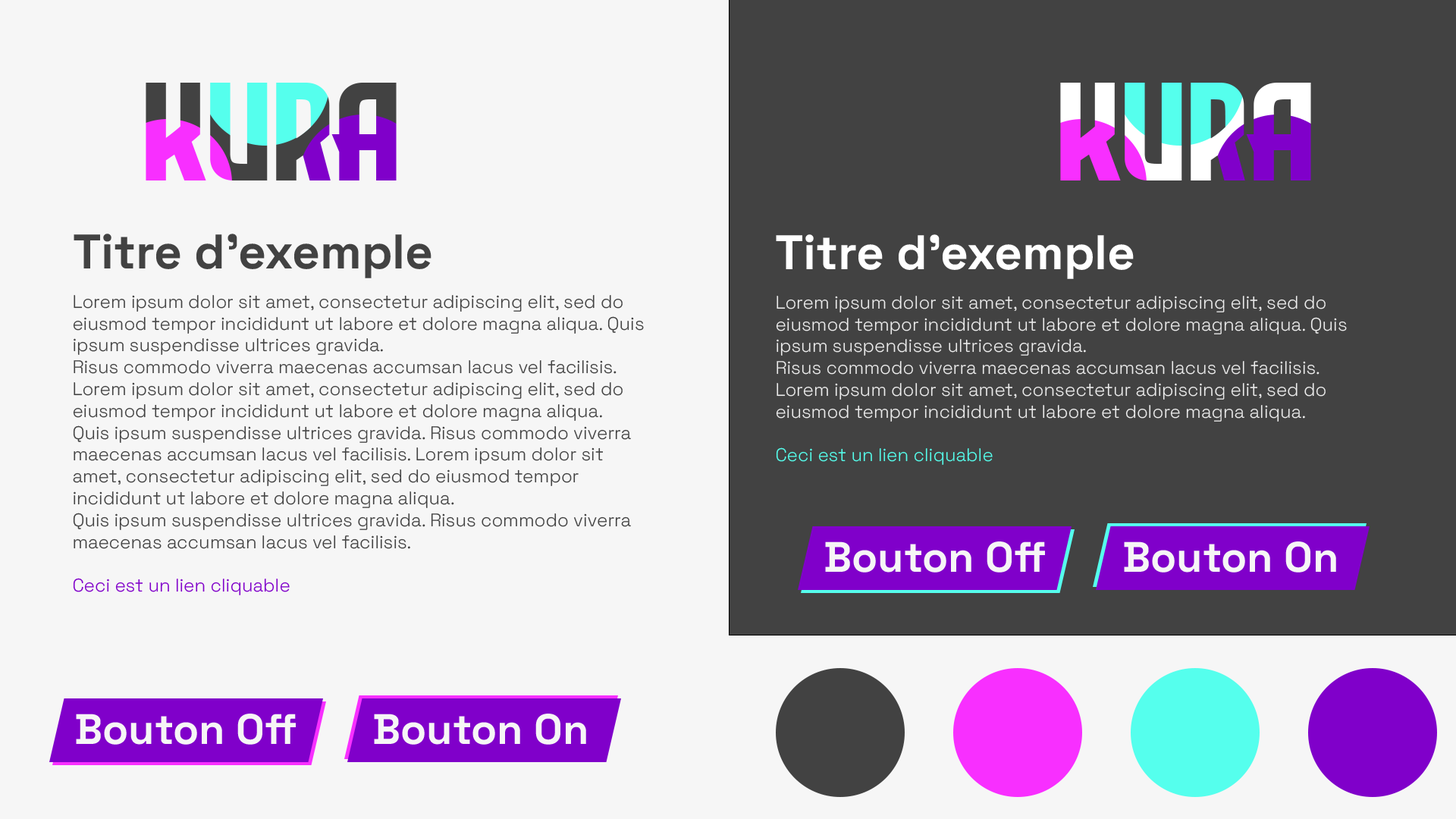
<style>
.page{position:relative;width:1456px;height:819px;background:#f6f6f6}
.page>*{position:absolute;margin:0}
.t1{font:139.5px "EvilEmpire"}
.t2{font:48.5px "SpaceGrotesk-Bold";color:#424242}
.t3{font:48.5px "SpaceGrotesk-Bold";color:#ffffff}
.t4{font:18.2px "SpaceGrotesk-Light";color:#424242}
.t5{font:18.2px "SpaceGrotesk-Light";color:#8000ca}
.t6{font:18.2px "SpaceGrotesk-Light";color:#ededed}
.t7{font:18.2px "SpaceGrotesk-Light";color:#55ffed}
.t8{font:42.5px "SpaceGrotesk-Bold";color:#f6f6f6}
</style>
<div class="page">
<p class="t1" style="left:146px;top:83px;width:251px;height:97px">KURA</p>
<p class="t1" style="left:1060px;top:83px;width:251px;height:97px">KURA</p>
<p class="t2" style="left:74px;top:234px;width:357px;height:44px">Titre d’exemple</p>
<p class="t3" style="left:776px;top:234px;width:358px;height:45px">Titre d’exemple</p>
<p class="t4" style="left:73px;top:295px;width:571px;height:300px">Lorem ipsum dolor sit amet, consectetur adipiscing elit, sed do eiusmod tempor incididunt ut labore et dolore magna aliqua. Quis ipsum suspendisse ultrices gravida. <br>Risus commodo viverra maecenas accumsan lacus vel facilisis.  Lorem ipsum dolor sit amet, consectetur adipiscing elit, sed do eiusmod tempor incididunt ut labore et dolore magna aliqua. <br>Quis ipsum suspendisse ultrices gravida. Risus commodo viverra maecenas accumsan lacus vel facilisis. Lorem ipsum dolor sit amet, consectetur adipiscing elit, sed do eiusmod tempor incididunt ut labore et dolore magna aliqua. <br>Quis ipsum suspendisse ultrices gravida. Risus commodo viverra maecenas accumsan lacus vel facilisis. <br><br><span class="t5">Ceci est un lien cliquable</span></p>
<p class="t6" style="left:776px;top:296px;width:571px;height:169px">Lorem ipsum dolor sit amet, consectetur adipiscing elit, sed do eiusmod tempor incididunt ut labore et dolore magna aliqua. Quis ipsum suspendisse ultrices gravida. <br>Risus commodo viverra maecenas accumsan lacus vel facilisis.  Lorem ipsum dolor sit amet, consectetur adipiscing elit, sed do eiusmod tempor incididunt ut labore et dolore magna aliqua. <br><br><span class="t7">Ceci est un lien cliquable</span></p>
<p class="t8" style="left:825px;top:541px;width:220px;height:32px">Bouton Off</p>
<p class="t8" style="left:1124px;top:541px;width:212px;height:32px">Bouton On</p>
<p class="t8" style="left:76px;top:714px;width:220px;height:31px">Bouton Off</p>
<p class="t8" style="left:374px;top:714px;width:212px;height:31px">Bouton On</p>
</div>
